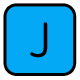
<style>
.page{position:relative;width:80px;height:80px;background:#03a9f4}
.page>*{position:absolute;margin:0}
.t1{font:48px "NanumSquareRoundR";color:#000000}
</style>
<div class="page">
<p class="t1" style="left:30px;top:22px;width:18px;height:36px">J</p>
</div>
